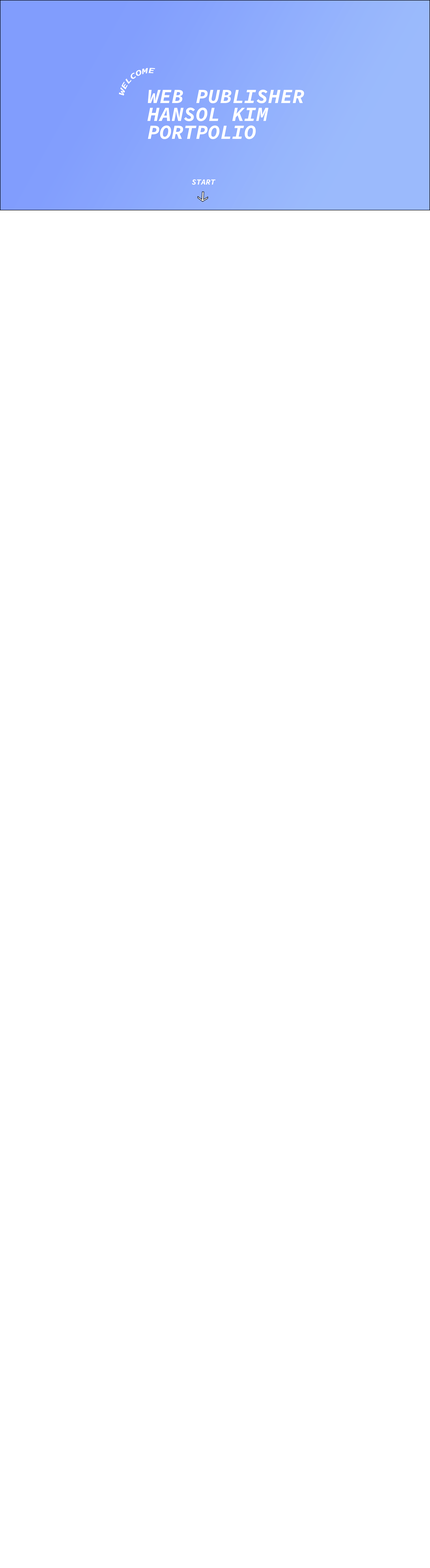
<style>
.page{position:relative;width:430px;height:1568px;background:#ffffff}
.page>*{position:absolute;margin:0}
.t1{font:11.2px "SourceCodeItalic-BoldItalic";color:#ffffff;font-variant:small-caps}
.t2{font:20.2px/17.9px "SourceCodeItalic-BoldItalic";color:#ffffff;font-variant:small-caps}
</style>
<div class="page">
<p class="t1" style="left:119px;top:68px;width:36px;height:28px;rotate:-36deg">welcome</p>
<p class="t2" style="left:147px;top:90px;width:157px;height:49px">WEB PUBLISHER <br>HANSOL KIM <br>PORTPOLIO</p>
<p class="t1" style="left:192px;top:179px;width:24px;height:6px">start</p>
</div>
